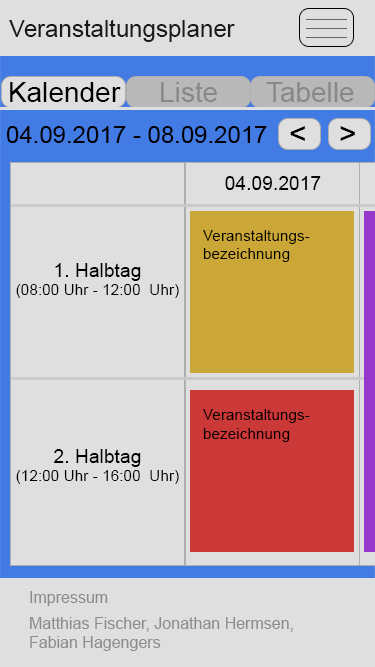
<style>
.page{position:relative;width:375px;height:667px;background:#dfdfdf}
.page>*{position:absolute;margin:0}
.t1{font:24px "ArialMT";color:#191919}
.t2{font:28px "ArialMT";color:#000000}
.t3{font:28px "ArialMT";color:#888888}
.t4{font:24px "ArialMT";color:#000000}
.t5{font:30px "ArialMT";color:#000000}
.t6{font:19.2px "ArialMT";color:#000000}
.t7{font:15.4px "ArialMT";color:#000000}
.t8{font:16px "ArialMT";color:#8c8c8c}
</style>
<div class="page">
<p class="t1" style="left:9px;top:19px;width:226px;height:23px">Veranstaltungsplaner</p>
<p class="t2" style="left:10px;top:82px;width:111px;height:20px">Kalender</p>
<p class="t3" style="left:161px;top:82px;width:56px;height:20px">Liste</p>
<p class="t3" style="left:266px;top:82px;width:88px;height:20px">Tabelle</p>
<p class="t4" style="left:6px;top:126px;width:261px;height:17px">04.09.2017 - 08.09.2017</p>
<p class="t5" style="left:290px;top:126px;width:15px;height:15px">&lt;</p>
<p class="t5" style="left:340px;top:126px;width:15px;height:15px">&gt;</p>
<p class="t6" style="left:225px;top:176px;width:96px;height:14px">04.09.2017</p>
<p class="t7" style="left:203px;top:230px;width:107px;height:32px">Veranstaltungs-<br>bezeichnung</p>
<p class="t7" style="left:16px;top:263px;width:163px;height:35px;text-align:center"><span class="t6">1. Halbtag<br></span>(08:00 Uhr - 12:00  Uhr)</p>
<p class="t7" style="left:203px;top:409px;width:107px;height:33px">Veranstaltungs-<br>bezeichnung</p>
<p class="t7" style="left:16px;top:449px;width:163px;height:35px;text-align:center"><span class="t6">2. Halbtag<br></span>(12:00 Uhr - 16:00  Uhr)</p>
<p class="t8" style="left:30px;top:591px;width:78px;height:15px">Impressum</p>
<p class="t8" style="left:30px;top:617px;width:263px;height:34px">Matthias Fischer, Jonathan Hermsen, <br>Fabian Hagengers</p>
</div>
